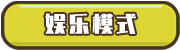
<style>
.page{position:relative;width:180px;height:50px;background:#dcd533}
.page>*{position:absolute;margin:0}
.t1{font:20.8px "ZhenyanGB-Regular";letter-spacing:0.13em;color:#ffffff}
</style>
<div class="page">
<p class="t1" style="left:45px;top:13px;width:91px;height:21px">娱乐模式</p>
</div>
